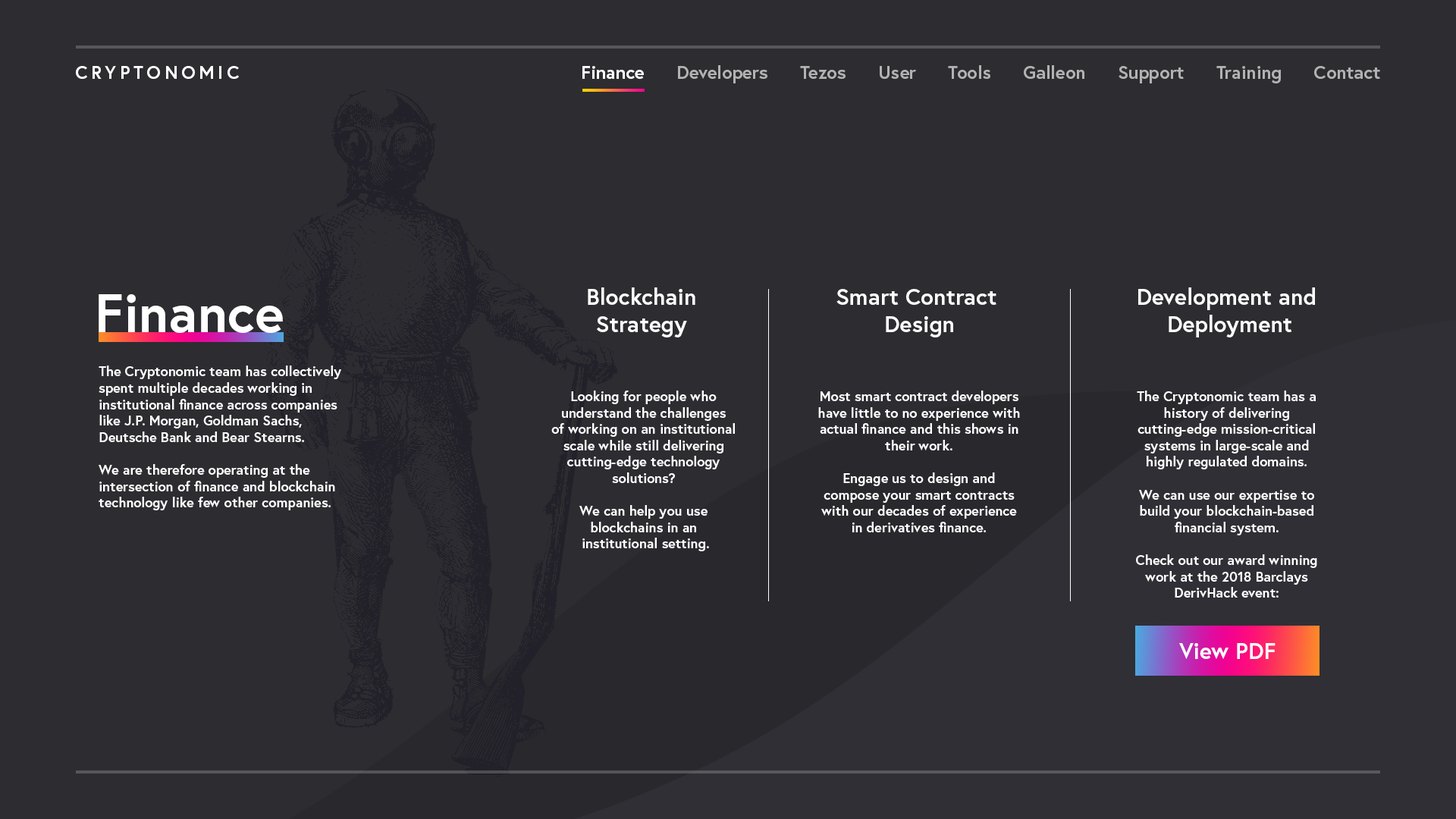
<style>
.page{position:relative;width:1456px;height:819px;background:#2d2c31}
.page>*{position:absolute;margin:0}
.t1{font:18.2px "Europa-Bold";letter-spacing:0.2em;color:#ffffff;text-transform:uppercase}
.t2{font:18.2px "Europa-Bold";color:#b2b2b2}
.t3{font:18.2px "Europa-Bold";color:#ffffff}
.t4{font:22.7px "Europa-Bold";color:#ffffff}
.t5{font:54.6px "Europa-Bold";color:#ffffff}
.t6{font:13.6px "Europa-Bold";color:#ffffff}
</style>
<div class="page">
<p class="t1" style="left:76px;top:66px;width:163px;height:13px">CryptoNOMIC</p>
<p class="t2" style="left:582px;top:65px;width:798px;height:18px"><span class="t3">Finance</span>      Developers      Tezos      User      Tools      Galleon      Support      Training      Contact</p>
<p class="t4" style="left:588px;top:287px;width:107px;height:50px;text-align:center">Blockchain<br>Strategy</p>
<p class="t4" style="left:836px;top:289px;width:160px;height:48px;text-align:center">Smart Contract <br>Design</p>
<p class="t4" style="left:1138px;top:287px;width:177px;height:50px;text-align:center">Development and <br>Deployment</p>
<p class="t5" style="left:99px;top:294px;width:184px;height:39px">Finance</p>
<p class="t6" style="left:99px;top:366px;width:242px;height:144px">The Cryptonomic team has collectively spent multiple decades working in <br>institutional finance across companies <br>like J.P. Morgan, Goldman Sachs, <br>Deutsche Bank and Bear Stearns. <br><br>We are therefore operating at the <br>intersection of finance and blockchain technology like few other companies.</p>
<p class="t6" style="left:551px;top:391px;width:184px;height:160px;text-align:center">Looking for people who <br>understand the challenges <br>of working on an institutional scale while still delivering <br>cutting-edge technology <br>solutions? <br><br>We can help you use <br>blockchains in an<br> institutional setting.</p>
<p class="t6" style="left:818px;top:391px;width:202px;height:141px;text-align:center">Most smart contract developers have little to no experience with actual finance and this shows in their work. <br><br>Engage us to design and <br>compose your smart contracts with our decades of experience in derivatives finance.</p>
<p class="t6" style="left:1136px;top:391px;width:181px;height:207px;text-align:center">The Cryptonomic team has a history of delivering <br>cutting-edge mission-critical systems in large-scale and highly regulated domains. <br><br>We can use our expertise to build your blockchain-based financial system.<br><br>Check out our award winning work at the 2018 Barclays DerivHack event:</p>
<p class="t4" style="left:1179px;top:643px;width:96px;height:16px">View PDF</p>
</div>
